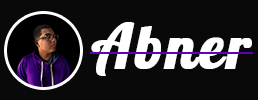
<style>
.page{position:relative;width:258px;height:100px;background:#090909}
.page>*{position:absolute;margin:0}
.t1{font:60px "Lobster-Regular";letter-spacing:0.04em;color:#ffffff;font-weight:bold}
</style>
<div class="page">
<p class="t1" style="left:91px;top:22px;width:161px;height:54px">Abner</p>
</div>
